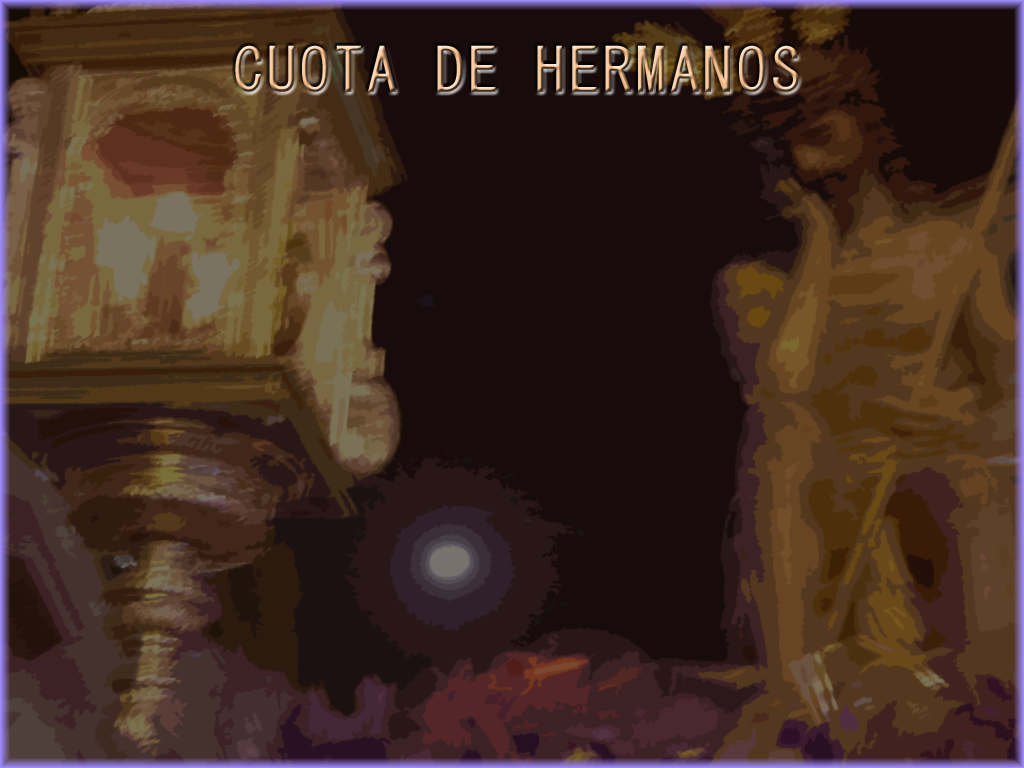
<style>
.page{position:relative;width:1024px;height:768px;background:#170c0b}
.page>*{position:absolute;margin:0}
.t1{font:60px "MS-Gothic";letter-spacing:0.06em}
</style>
<div class="page">
<p class="t1" style="left:235px;top:45px;width:564px;height:47px">CUOTA DE HERMANOS</p>
</div>
